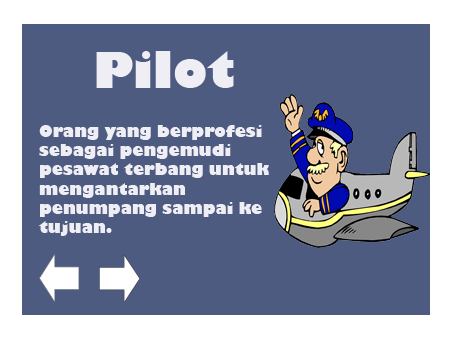
<style>
.page{position:relative;width:454px;height:340px;background:#4d5b80}
.page>*{position:absolute;margin:0}
.t1{font:48px "GillSans-UltraBold";color:#f0eef5}
.t2{font:16px "GillSans-UltraBold";color:#f0eef5}
</style>
<div class="page">
<p class="t1" style="left:96px;top:51px;width:138px;height:37px">Pilot</p>
<p class="t2" style="left:38px;top:125px;width:231px;height:111px">Orang yang berprofesi<br>sebagai pengemudi<br>pesawat terbang untuk<br>mengantarkan <br>penumpang sampai ke <br>tujuan.</p>
</div>
